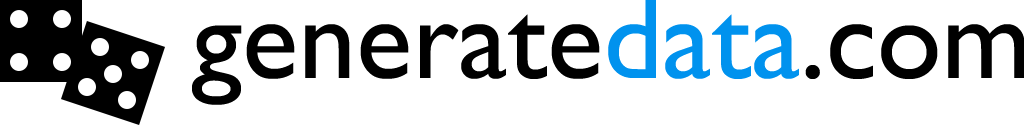
<style>
.page{position:relative;width:1024px;height:128px;background:#ffffff}
.page>*{position:absolute;margin:0}
.t1{font:116.7px "GillSans";color:#000000}
.t2{font:116.7px "GillSans";color:#0092ee}
</style>
<div class="page">
<p class="t1" style="left:192px;top:0px;width:833px;height:105px">generate<span class="t2">data</span>.com</p>
</div>
